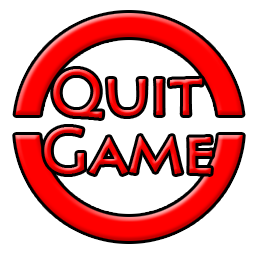
<style>
.page{position:relative;width:256px;height:256px;background:#ffffff}
.page>*{position:absolute;margin:0}
.t1{font:60px "Pericles"}
</style>
<div class="page">
<p class="t1" style="left:53px;top:69px;width:150px;height:49px">Quit</p>
<p class="t1" style="left:44px;top:127px;width:169px;height:47px">Game</p>
</div>
